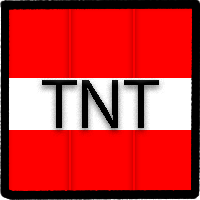
<style>
.page{position:relative;width:200px;height:200px;background:#ff0000}
.page>*{position:absolute;margin:0}
.t1{font:70.8px "MyriadPro-Regular";color:#000000}
</style>
<div class="page">
<p class="t1" style="left:42px;top:80px;width:117px;height:48px">TNT</p>
</div>
